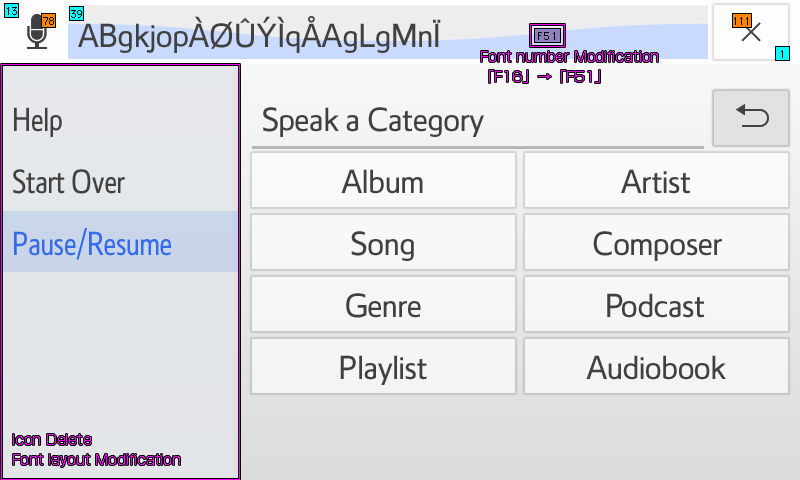
<style>
.page{position:relative;width:800px;height:480px}
.page>*{position:absolute;margin:0}
.t1{font:30px "Tfont1502_T1S";color:#404041}
.t2{font:14px/20px "ShinGoPro-Regular";color:#ff00ff}
.t3{font:30px "Tfont1502_T2S";color:#404041}
.t4{font:30px "Tfont1502_T1S";color:#404040}
.t5{font:30px "Tfont1502_T2S";color:#336ce6}
</style>
<div class="page">
<p class="t1" style="left:78px;top:16px;width:363px;height:37px">ABgkjopÀØÛÝÌqÅAgLgMnÏ</p>
<p class="t2" style="left:481px;top:51px;width:177px;height:32px">Font number Modification<br>「F16」→「F51」</p>
<p class="t3" style="left:14px;top:107px;width:48px;height:30px">Help</p>
<p class="t4" style="left:263px;top:107px;width:221px;height:30px">Speak a Category</p>
<p class="t3" style="left:13px;top:169px;width:112px;height:25px">Start Over</p>
<p class="t1" style="left:341px;top:169px;width:82px;height:25px">Album</p>
<p class="t1" style="left:621px;top:169px;width:70px;height:25px">Artist</p>
<p class="t5" style="left:14px;top:228px;width:157px;height:32px">Pause/Resume</p>
<p class="t1" style="left:351px;top:231px;width:63px;height:30px">Song</p>
<p class="t1" style="left:593px;top:231px;width:129px;height:30px">Composer</p>
<p class="t1" style="left:346px;top:293px;width:75px;height:25px">Genre</p>
<p class="t1" style="left:607px;top:293px;width:98px;height:25px">Podcast</p>
<p class="t1" style="left:340px;top:355px;width:87px;height:30px">Playlist</p>
<p class="t1" style="left:586px;top:355px;width:140px;height:25px">Audiobook</p>
<p class="t2" style="left:13px;top:434px;width:167px;height:33px">Icon Delete<br>Font layout Modification</p>
</div>
